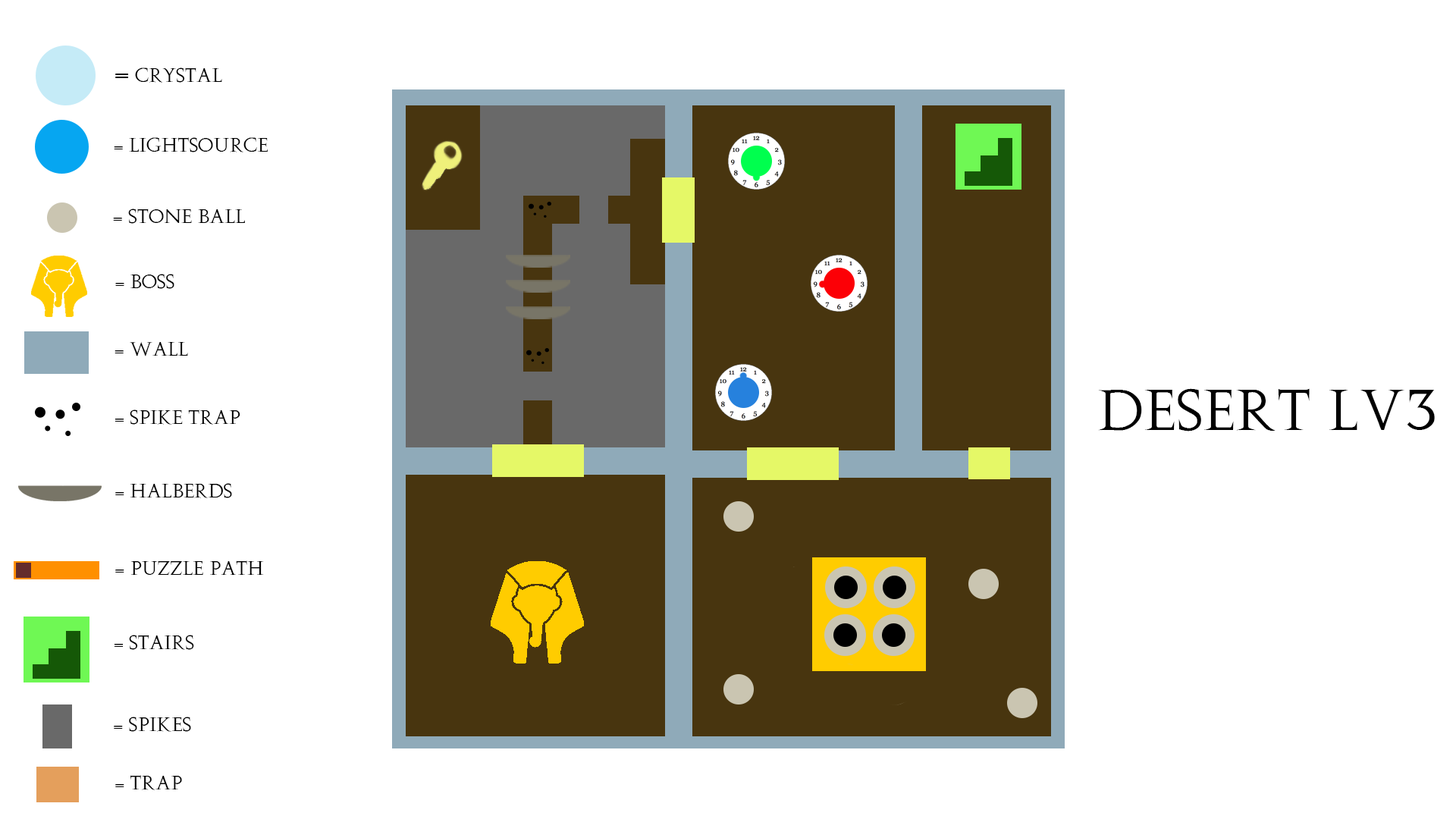
<style>
.page{position:relative;width:1456px;height:819px;background:#ffffff}
.page>*{position:absolute;margin:0}
.t1{font:18.2px "Augustus";color:#000000}
.t2{font:28.2px "Augustus";color:#000000}
.t3{font:54.6px "Augustus";color:#000000}
</style>
<div class="page">
<p class="t1" style="left:115px;top:67px;width:107px;height:16px"><span class="t2">=</span> Crystal</p>
<p class="t1" style="left:114px;top:137px;width:154px;height:15px">= lightSource</p>
<p class="t1" style="left:113px;top:209px;width:132px;height:15px">= Stone BAll</p>
<p class="t1" style="left:115px;top:274px;width:59px;height:15px">= Boss</p>
<p class="t1" style="left:115px;top:341px;width:73px;height:15px">= Wall</p>
<p class="t3" style="left:1098px;top:388px;width:337px;height:43px">desert Lv3</p>
<p class="t1" style="left:115px;top:409px;width:125px;height:16px">= spike Trap</p>
<p class="t1" style="left:115px;top:483px;width:117px;height:15px">= Halberds</p>
<p class="t1" style="left:115px;top:560px;width:149px;height:16px">= puzzle PAth</p>
<p class="t1" style="left:114px;top:635px;width:80px;height:15px">= Stairs</p>
<p class="t1" style="left:114px;top:717px;width:77px;height:15px">= Spikes</p>
<p class="t1" style="left:115px;top:775px;width:67px;height:15px">= Trap</p>
</div>
